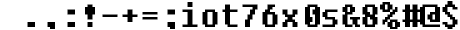
<style>
.page{position:relative;width:460px;height:30px;background:#ffffff}
.page>*{position:absolute;margin:0}
.t1{font:32px "Fixedsys";color:#000000}
</style>
<div class="page">
<p class="t1" style="left:27px;top:0px;width:431px;height:32px">.,:!-+=;iot76x0s&amp;8%#@$</p>
</div>
